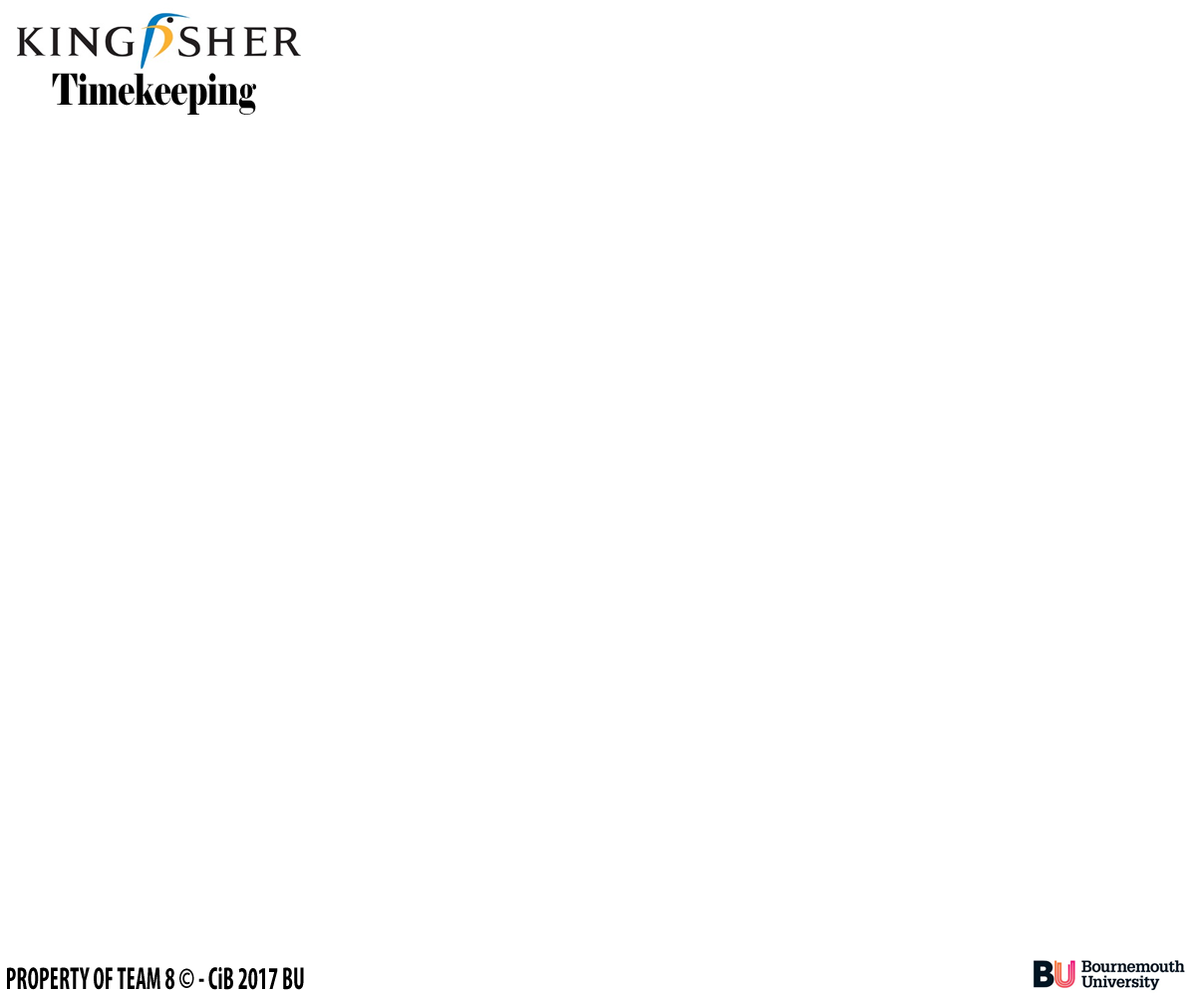
<style>
.page{position:relative;width:1196px;height:997px;background:#ffffff}
.page>*{position:absolute;margin:0}
.t1{font:43px "Elephant-Regular";color:#000000;scale:0.73 1}
.t2{font:31.7px "MyriadPro-BoldCond";color:#000000;scale:0.74 1}
</style>
<div class="page">
<p class="t1" style="left:52px;top:73px;width:204px;height:42px">Timekeeping</p>
<p class="t2" style="left:7px;top:967px;width:297px;height:23px">PROPERTY OF TEAM 8 © - CiB 2017 BU</p>
</div>
